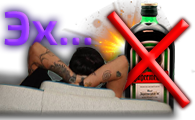
<style>
.page{position:relative;width:195px;height:120px}
.page>*{position:absolute;margin:0}
.t1{font:48px "Exo2-Bold"}
</style>
<div class="page">
<p class="t1" style="left:4px;top:11px;width:88px;height:35px">Эх...</p>
</div>
